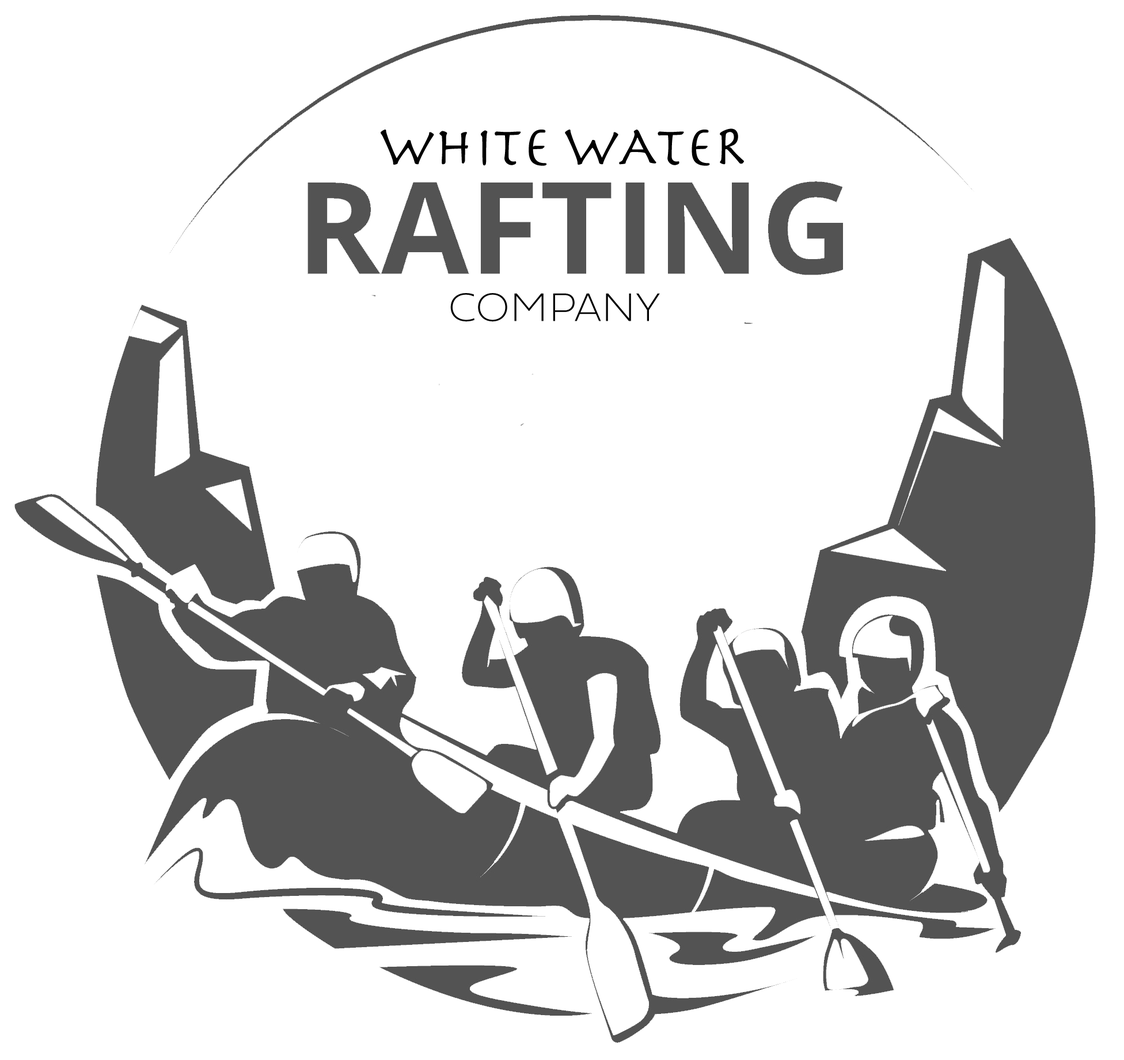
<style>
.page{position:relative;width:1124px;height:1060px;background:#ffffff}
.page>*{position:absolute;margin:0}
.t1{font:57.6px "Herculanum";color:#000000}
.t2{font:41.5px "Fieldwork-Geo-Hair";color:#000000}
</style>
<div class="page">
<p class="t1" style="left:381px;top:128px;width:363px;height:38px">WHITE WATER</p>
<p class="t2" style="left:450px;top:293px;width:210px;height:29px">COMPANY</p>
</div>
